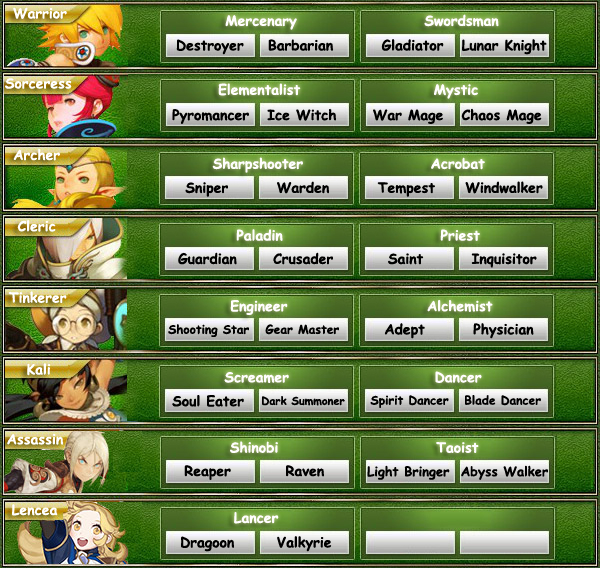
<style>
.page{position:relative;width:600px;height:568px}
.page>*{position:absolute;margin:0}
.t1{font:14px "ComicSansMS-Bold";color:#ffffff}
.t2{font:14px "ComicSansMS-Bold";color:#fffefe}
.t3{font:14px "ComicSansMS-Bold";color:#000000}
.t4{font:12px "ComicSansMS-Bold";color:#000000}
.t5{font:11px "ComicSansMS-Bold";color:#000000}
.t6{font:13px "ComicSansMS-Bold";color:#000000}
</style>
<div class="page">
<p class="t1" style="left:13px;top:7px;width:54px;height:12px">Warrior</p>
<p class="t2" style="left:225px;top:14px;width:274px;height:16px">Mercenary                     Swordsman</p>
<p class="t3" style="left:176px;top:39px;width:371px;height:16px"><span class="t1"> </span>Destroyer    Barbarian        Gladiator   Lunar Knight</p>
<p class="t1" style="left:5px;top:78px;width:67px;height:11px">Sorceress</p>
<p class="t2" style="left:218px;top:83px;width:260px;height:16px">Elementalist                      Mystic</p>
<p class="t3" style="left:172px;top:108px;width:370px;height:16px">Pyromancer   Ice Witch      War Mage   Chaos Mage</p>
<p class="t1" style="left:13px;top:148px;width:47px;height:13px">Archer</p>
<p class="t2" style="left:212px;top:157px;width:273px;height:16px">Sharpshooter                     Acrobat</p>
<p class="t3" style="left:185px;top:181px;width:358px;height:16px">Sniper        Warden        Tempest     Windwalker</p>
<p class="t1" style="left:17px;top:220px;width:39px;height:12px">Cleric</p>
<p class="t2" style="left:236px;top:229px;width:244px;height:12px">Paladin                          Priest</p>
<p class="t3" style="left:178px;top:252px;width:359px;height:16px">Guardian      Crusader         Saint        Inquisitor</p>
<p class="t1" style="left:8px;top:291px;width:59px;height:12px">Tinkerer</p>
<p class="t2" style="left:230px;top:300px;width:263px;height:15px">Engineer                       Alchemist</p>
<p class="t4" style="left:168px;top:324px;width:81px;height:13px">Shooting Star</p>
<p class="t4" style="left:265px;top:324px;width:74px;height:11px">Gear Master</p>
<p class="t3" style="left:384px;top:323px;width:150px;height:16px">Adept        Physician</p>
<p class="t1" style="left:27px;top:363px;width:24px;height:13px">Kali</p>
<p class="t2" style="left:224px;top:371px;width:258px;height:12px">Screamer                        Dancer</p>
<p class="t3" style="left:172px;top:395px;width:72px;height:12px">Soul Eater</p>
<p class="t5" style="left:262px;top:396px;width:83px;height:10px">Dark Summoner</p>
<p class="t4" style="left:370px;top:395px;width:171px;height:13px">Spirit Dancer   Blade Dancer</p>
<p class="t1" style="left:7px;top:433px;width:56px;height:12px">Assassin</p>
<p class="t2" style="left:230px;top:441px;width:249px;height:12px">Shinobi                          Taoist</p>
<p class="t3" style="left:184px;top:465px;width:140px;height:15px">Reaper         Raven</p>
<p class="t6" style="left:367px;top:465px;width:181px;height:15px">Light Bringer  Abyss Walker</p>
<p class="t1" style="left:12px;top:504px;width:46px;height:12px">Lencea</p>
<p class="t2" style="left:234px;top:512px;width:45px;height:12px">Lancer</p>
<p class="t3" style="left:181px;top:536px;width:151px;height:16px">Dragoon       Valkyrie</p>
</div>
